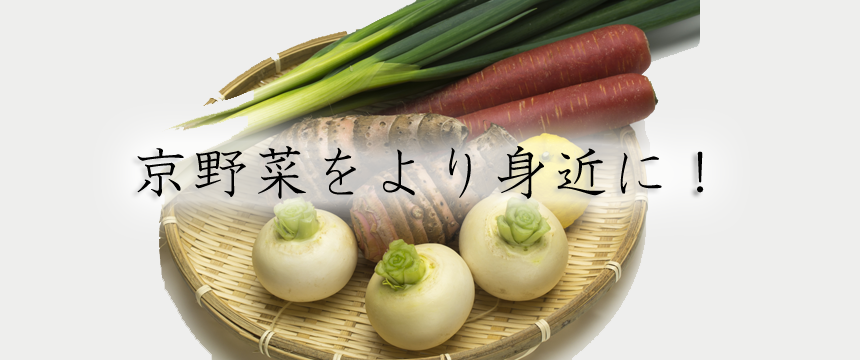
<style>
.page{position:relative;width:860px;height:360px;background:#eeeeed}
.page>*{position:absolute;margin:0}
.t1{font:60px "HGKyokashotai";color:#000000}
</style>
<div class="page">
<p class="t1" style="left:137px;top:146px;width:567px;height:53px">京野菜をより身近に！</p>
</div>
